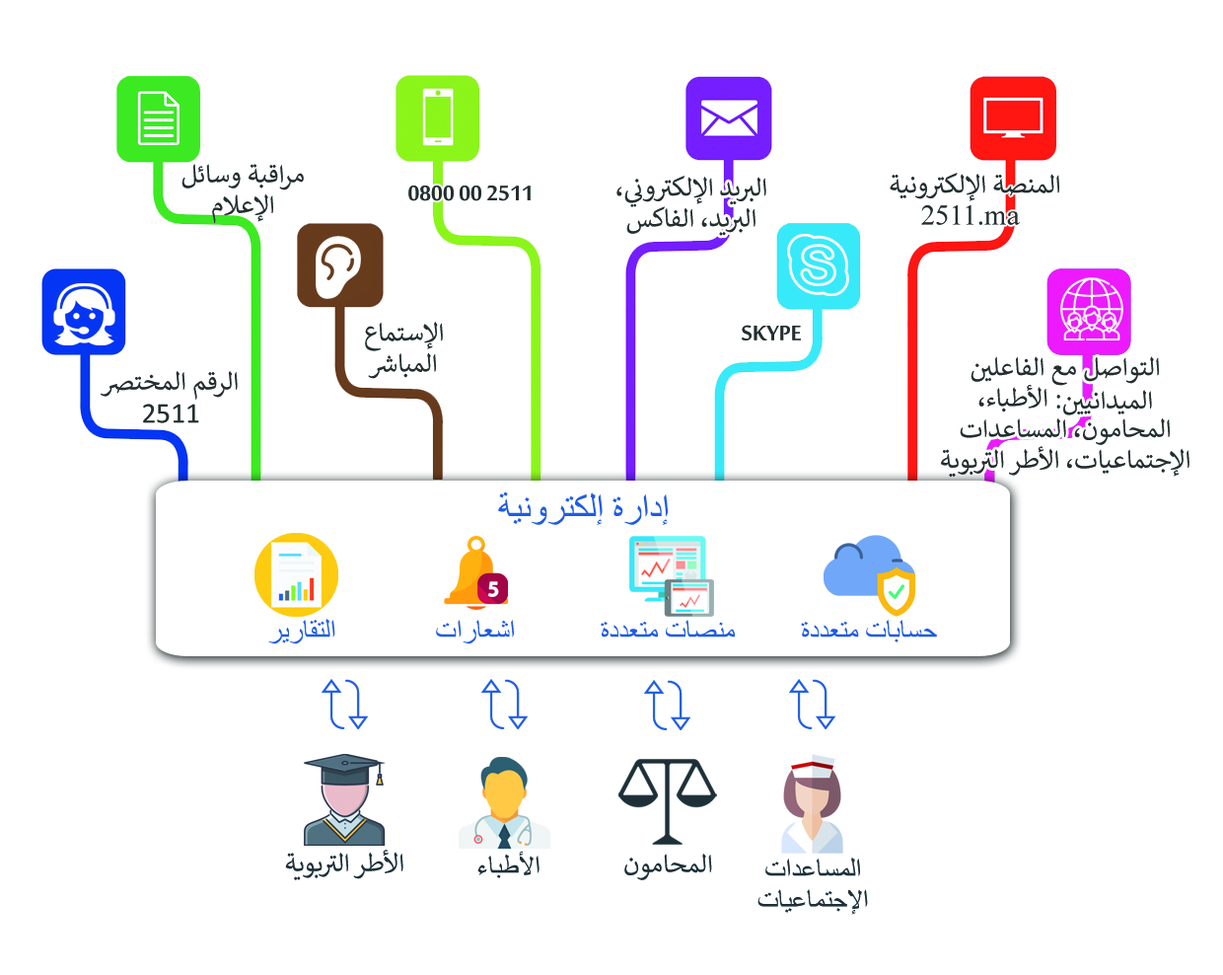
<style>
.page{position:relative;width:1223px;height:975px;background:#ffffff}
.page>*{position:absolute;margin:0}
.t1{font:28.8px/30.9px "Calibri";color:#242e2f}
.t2{font:28.8px "Calibri";color:#242e2f}
.t3{font:28.8px "SakkalMajallaBold";color:#242e2f}
.t4{font:28.8px "TimesNewRomanPSMT";color:#242e2f}
.t5{font:37px "TimesNewRomanPSMT";color:#1e5ce6}
.t6{font:28.8px "TimesNewRomanPSMT";color:#1e5ce6}
.t7{font:28.8px "Calibri";color:#1e2f37}
.t8{font:28.8px "TimesNewRomanPSMT";color:#1e2f37}
.t9{font:28.8px/30.8px "TimesNewRomanPSMT";color:#1e2f37}
</style>
<div class="page">
<p class="t1" style="left:182px;top:164px;width:122px;height:59px;text-align:center">مراقبة وسائل الإعلام</p>
<p class="t2" style="left:890px;top:173px;width:170px;height:28px">المنصة الإلكترونية</p>
<p class="t3" style="left:408px;top:185px;width:123px;height:16px">0800 00 2511</p>
<p class="t1" style="left:617px;top:176px;width:150px;height:60px;text-align:center">البريد الإلكتروني، البريد، الفاكس</p>
<p class="t4" style="left:921px;top:205px;width:99px;height:20px">2511.ma</p>
<p class="t1" style="left:365px;top:322px;width:78px;height:57px;text-align:center">الإستماع المباشر</p>
<p class="t3" style="left:742px;top:325px;width:59px;height:15px">SKYPE</p>
<p class="t1" style="left:941px;top:356px;width:249px;height:121px;text-align:center">التواصل مع الفاعلين الميدانيين: الأطباء، المحامون، المساعدات الإجتماعيات، الأطر التربوية</p>
<p class="t1" style="left:101px;top:371px;width:137px;height:52px;text-align:center">الرقم المختصر 2511</p>
<p class="t5" style="left:498px;top:491px;width:170px;height:34px">إدارة إلكترونية</p>
<p class="t6" style="left:268px;top:618px;width:67px;height:26px">التقارير</p>
<p class="t6" style="left:436px;top:620px;width:78px;height:24px">اشعارات</p>
<p class="t6" style="left:601px;top:620px;width:134px;height:17px">منصات متعددة</p>
<p class="t6" style="left:801px;top:620px;width:136px;height:22px">حسابات متعددة</p>
<p class="t7" style="left:285px;top:849px;width:119px;height:31px">الأطر التربوية</p>
<p class="t8" style="left:477px;top:850px;width:63px;height:28px">الأطباء</p>
<p class="t7" style="left:624px;top:853px;width:88px;height:27px">المحامون</p>
<p class="t9" style="left:758px;top:856px;width:110px;height:59px;text-align:center">المساعدات الإجتماعيات</p>
</div>
